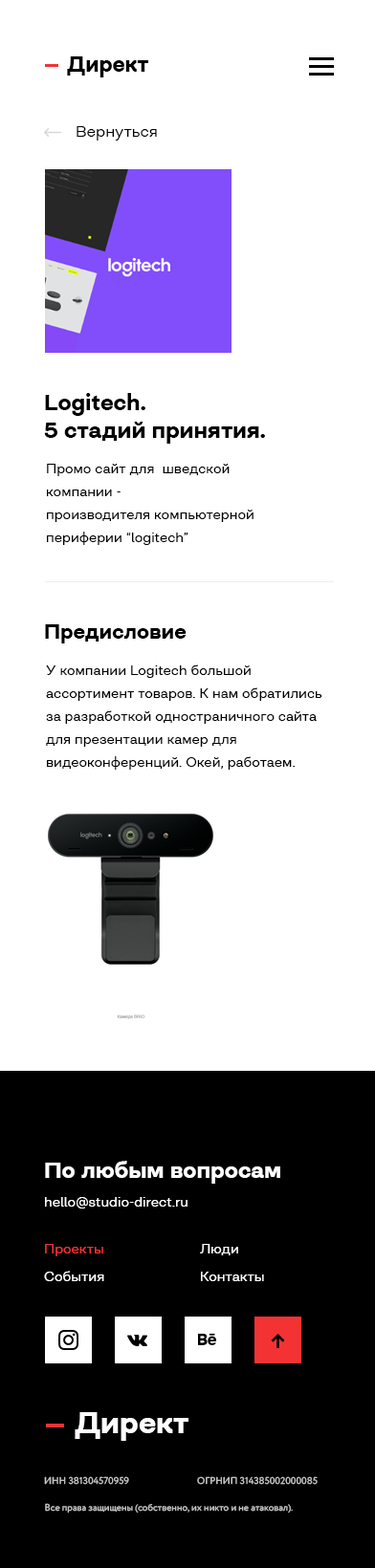
<style>
.page{position:relative;width:375px;height:1568px;background:#ffffff}
.page>*{position:absolute;margin:0}
.t1{font:21.9px "Closer-Bold";color:#000000}
.t2{font:15.3px "Closer-Regular";color:#000000}
.t3{font:22.9px "Closer-Bold";color:#000000}
.t4{font:13.4px/22.9px "Closer-Regular";color:#000000}
.t5{font:21px "Closer-Bold";color:#000000}
.t6{font:22.9px "Closer-Bold";color:#ffffff}
.t7{font:13.4px "Closer-Regular";color:#ffffff}
.t8{font:13.4px "Closer-Regular";color:#f33333}
.t9{font:30.6px "Closer-Bold";color:#ffffff}
.t10{font:9.6px "Circe-Regular";color:#c8c8c8}
</style>
<div class="page">
<p class="t1" style="left:67px;top:56px;width:81px;height:21px">Директ</p>
<p class="t2" style="left:76px;top:126px;width:81px;height:15px">Вернуться</p>
<p class="t3" style="left:44px;top:393px;width:221px;height:51px">Logitech. <br>5 стадий принятия.</p>
<p class="t4" style="left:47px;top:464px;width:206px;height:81px">Промо сайт для  шведской компании - <br>производителя компьютерной периферии “logitech”</p>
<p class="t5" style="left:45px;top:624px;width:141px;height:19px">Предисловие</p>
<p class="t4" style="left:46px;top:664px;width:276px;height:106px">У компании Logitech большой ассортимент товаров. К нам обратились за разработкой одностраничного сайта для презентации камер для видеоконференций. Окей, работаем.</p>
<p class="t6" style="left:45px;top:1161px;width:235px;height:23px">По любым вопросам</p>
<p class="t7" style="left:45px;top:1197px;width:142px;height:12px">hello@studio-direct.ru</p>
<p class="t8" style="left:45px;top:1244px;width:58px;height:12px">Проекты</p>
<p class="t7" style="left:200px;top:1244px;width:38px;height:11px">Люди</p>
<p class="t7" style="left:44px;top:1271px;width:60px;height:10px">События</p>
<p class="t7" style="left:201px;top:1272px;width:63px;height:9px">Контакты</p>
<p class="t9" style="left:75px;top:1412px;width:113px;height:29px">Директ</p>
<p class="t10" style="left:44px;top:1476px;width:85px;height:9px">ИНН 381304570959</p>
<p class="t10" style="left:197px;top:1476px;width:120px;height:9px">ОГРНИП 314385002000085</p>
<p class="t10" style="left:45px;top:1503px;width:248px;height:11px">Все права защищены (собственно, их никто и не атаковал).</p>
</div>
